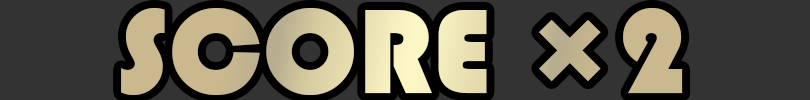
<style>
.page{position:relative;width:810px;height:100px;background:#333333}
.page>*{position:absolute;margin:0}
.t1{font:125px "Bauhaus93"}
</style>
<div class="page">
<p class="t1" style="left:121px;top:8px;width:562px;height:87px">SCORE ×2</p>
</div>
